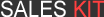
<style>
.page{position:relative;width:104px;height:17px;background:#333333}
.page>*{position:absolute;margin:0}
.t1{font:22.7px "ArialMT";color:#ffffff;scale:0.92 1}
.t2{font:22.7px "ArialMT";color:#ff3f3f;scale:0.92 1}
</style>
<div class="page">
<p class="t1" style="left:1px;top:0px;width:104px;height:18px">SALES <span class="t2">KIT</span></p>
</div>
